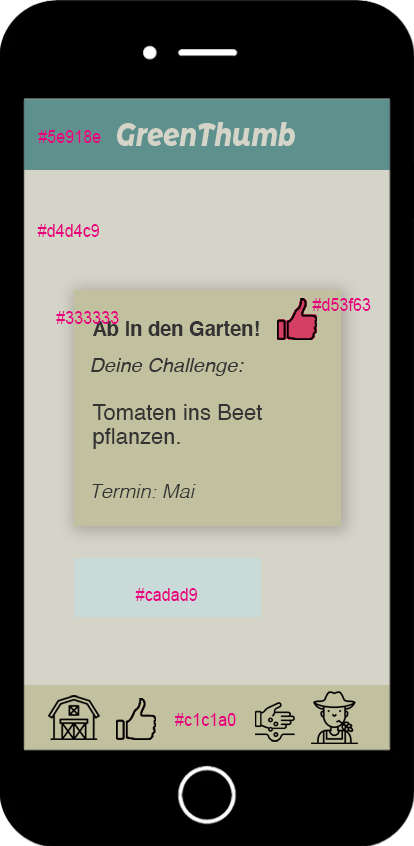
<style>
.page{position:relative;width:414px;height:846px;background:#000000}
.page>*{position:absolute;margin:0}
.t1{font:32px "MontserratAlternates-ExtraBoldItalic";color:#d4d4c9;scale:0.8 1}
.t2{font:18px "ArialMT";color:#e6007e;scale:0.9 1}
.t3{font:20px "Helvetica-Bold";color:#333333}
.t4{font:20px "Helvetica-Oblique";color:#333333}
.t5{font:22px/24px "Helvetica";color:#333333}
.t6{font:20px "Helvetica-LightOblique";color:#333333}
</style>
<div class="page">
<p class="t1" style="left:117px;top:122px;width:178px;height:24px">GreenThumb</p>
<p class="t2" style="left:38px;top:130px;width:63px;height:13px">#5e918e</p>
<p class="t2" style="left:37px;top:224px;width:62px;height:13px">#d4d4c9</p>
<p class="t2" style="left:312px;top:298px;width:59px;height:13px">#d53f63</p>
<p class="t2" style="left:56px;top:311px;width:63px;height:13px">#333333</p>
<p class="t3" style="left:93px;top:321px;width:166px;height:15px">Ab in den Garten!</p>
<p class="t4" style="left:91px;top:358px;width:153px;height:18px">Deine Challenge:</p>
<p class="t5" style="left:92px;top:404px;width:170px;height:45px">Tomaten ins Beet <br>pflanzen.</p>
<p class="t6" style="left:92px;top:484px;width:104px;height:14px">Termin: Mai</p>
<p class="t2" style="left:135px;top:588px;width:62px;height:13px">#cadad9</p>
<p class="t2" style="left:175px;top:713px;width:61px;height:13px">#c1c1a0</p>
</div>
